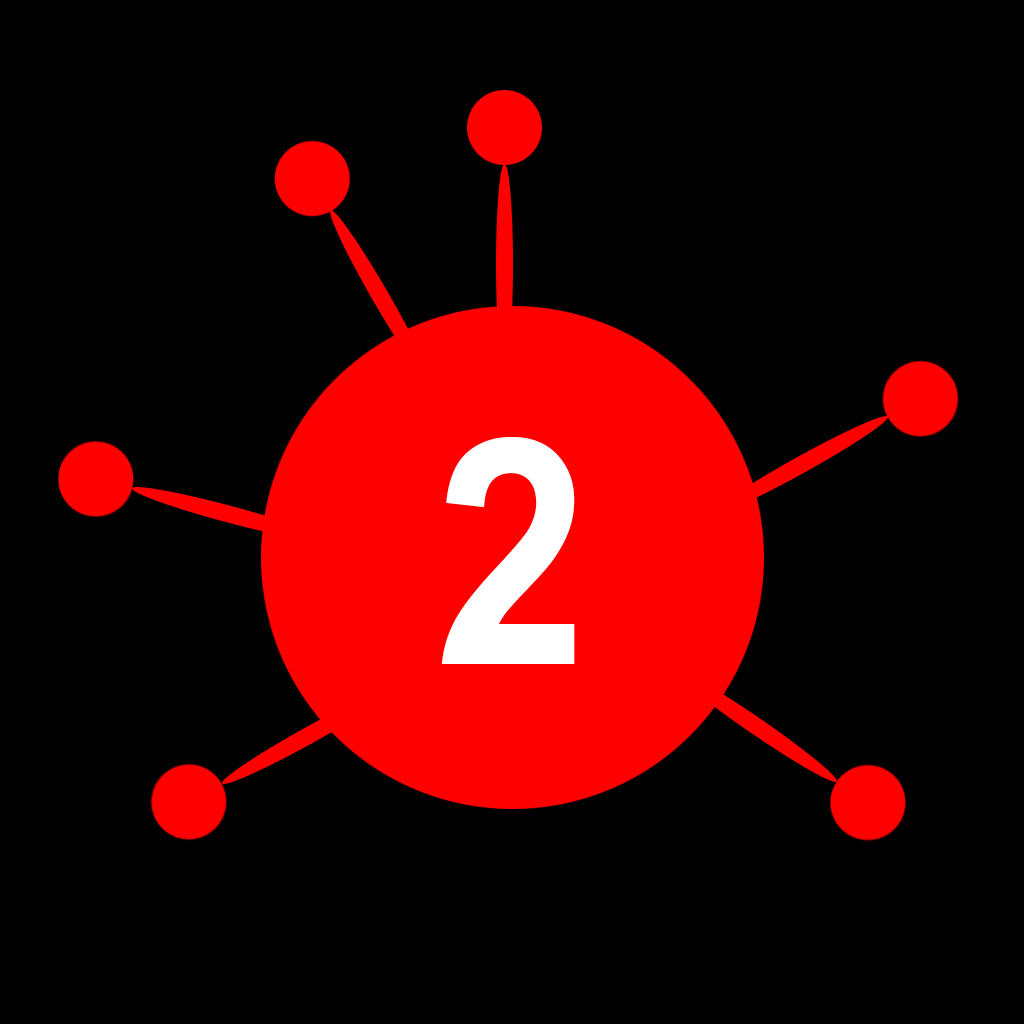
<style>
.page{position:relative;width:1024px;height:1024px;background:#000000}
.page>*{position:absolute;margin:0}
.t1{font:316px "Arial-BoldMT";color:#ffffff;scale:0.87 1}
</style>
<div class="page">
<p class="t1" style="left:441px;top:437px;width:134px;height:227px">2</p>
</div>
